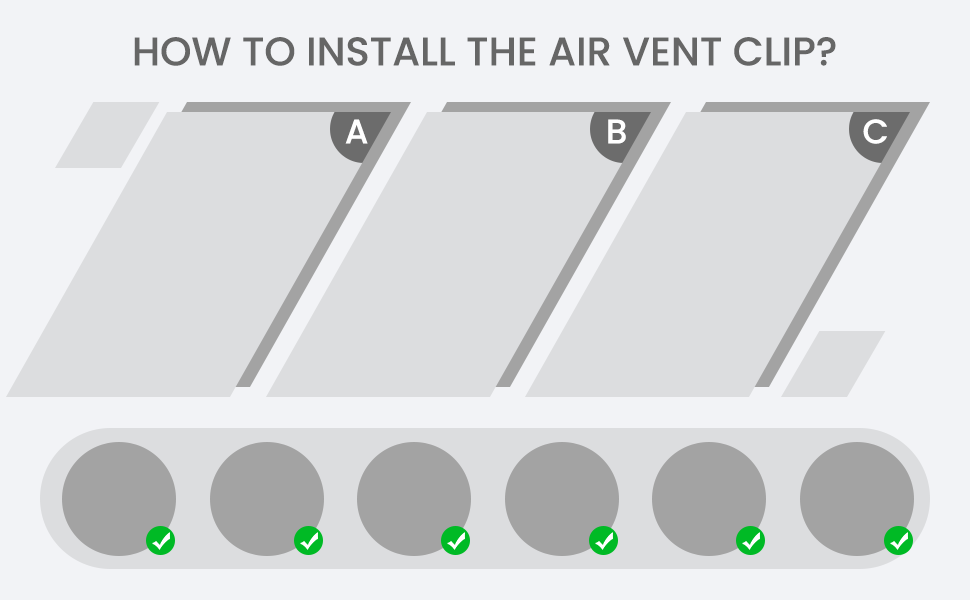
<style>
.page{position:relative;width:970px;height:600px;background:#dcdddf}
.page>*{position:absolute;margin:0}
.t1{font:40px "Poppins-Medium";color:#666666;text-transform:uppercase}
.t2{font:34px "Poppins-Medium";color:#ffffff;text-transform:uppercase}
</style>
<div class="page">
<p class="t1" style="left:134px;top:37px;width:702px;height:29px">How to Install the Air Vent Clip?</p>
<p class="t2" style="left:345px;top:119px;width:23px;height:25px">A</p>
<p class="t2" style="left:608px;top:119px;width:18px;height:25px">B</p>
<p class="t2" style="left:863px;top:119px;width:24px;height:25px">C</p>
</div>
